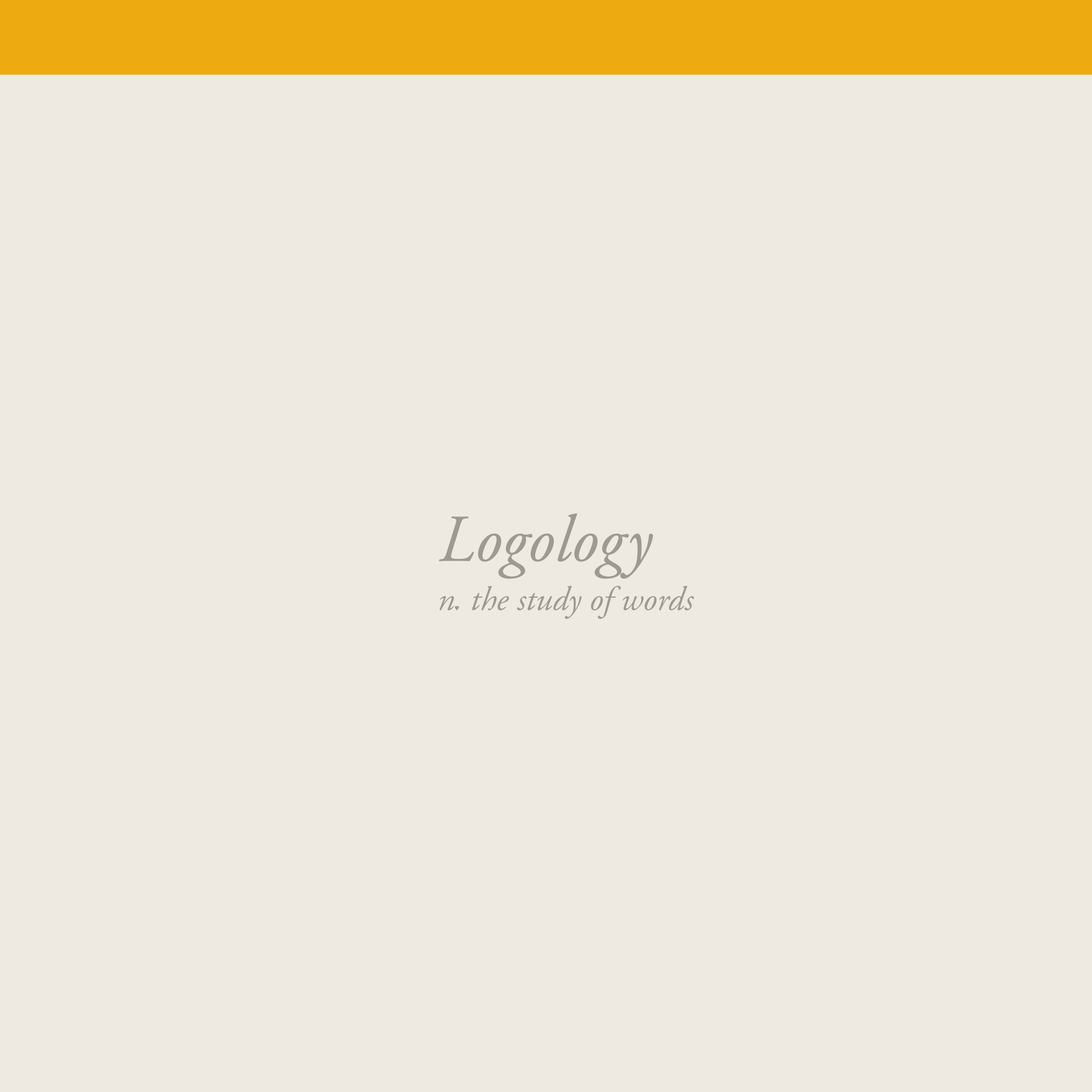
<style>
.page{position:relative;width:1092px;height:1092px;background:#eeeae1}
.page>*{position:absolute;margin:0}
.t1{font:66.8px "AGaramondPro-Italic";color:#9e9a91}
.t2{font:34.1px "AGaramondPro-Italic";color:#9e9a91}
.t3{font:4.9px "AdobeGothicStd-Bold";color:#9e9a91}
</style>
<div class="page">
<p class="t1" style="left:439px;top:513px;width:214px;height:66px">Logology</p>
<p class="t2" style="left:439px;top:586px;width:255px;height:33px">n  the study of words</p>
<p class="t3" style="left:455px;top:606px;width:4px;height:4px">♥︎</p>
</div>
